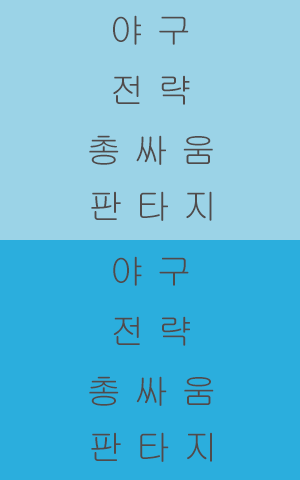
<style>
.page{position:relative;width:300px;height:480px;background:#9bd3e7}
.page>*{position:absolute;margin:0}
.t1{font:35.5px "Gulim";color:#504b4b}
</style>
<div class="page">
<p class="t1" style="left:113px;top:15px;width:76px;height:30px">야 구</p>
<p class="t1" style="left:113px;top:75px;width:77px;height:30px">전 략</p>
<p class="t1" style="left:89px;top:135px;width:124px;height:30px">총 싸 움</p>
<p class="t1" style="left:91px;top:191px;width:121px;height:30px">판 타 지</p>
<p class="t1" style="left:113px;top:256px;width:76px;height:30px">야 구</p>
<p class="t1" style="left:113px;top:316px;width:77px;height:30px">전 략</p>
<p class="t1" style="left:89px;top:376px;width:125px;height:30px">총 싸 움</p>
<p class="t1" style="left:91px;top:432px;width:121px;height:30px">판 타 지</p>
</div>
